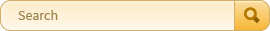
<style>
.page{position:relative;width:270px;height:31px}
.page>*{position:absolute;margin:0}
.t1{font:14px "SourceSansPro-Regular";color:#9f834d}
</style>
<div class="page">
<p class="t1" style="left:18px;top:10px;width:40px;height:10px">Search</p>
</div>
